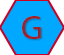
<style>
.page{position:relative;width:64px;height:55px;background:#00a8ff}
.page>*{position:absolute;margin:0}
.t1{font:33.3px "MyriadPro-Regular";color:#a31c1c}
</style>
<div class="page">
<p class="t1" style="left:22px;top:16px;width:19px;height:23px">G</p>
</div>
